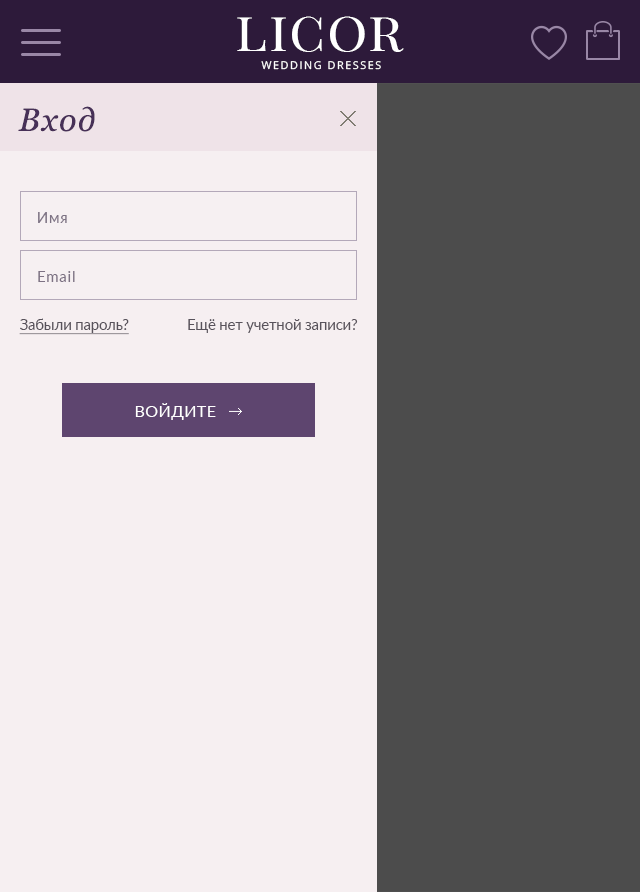
<style>
.page{position:relative;width:640px;height:892px;background:#f6eff1}
.page>*{position:absolute;margin:0}
.t1{font:55.3px "PlayfairDisplaySC-Regular";letter-spacing:0.03em;color:#ffffff}
.t2{font:10.6px "OpenSans";letter-spacing:0.15em;color:#ffffff}
.t3{font:32px "Georgia-Italic";letter-spacing:0.05em;color:#473057}
.t4{font:15px "Lato-Regular";letter-spacing:0.05em;color:#7d7284}
.t5{font:15px "Lato-Regular";letter-spacing:-0.015em;color:#58525b}
.t6{font:15px "Lato-Regular";letter-spacing:-0.015em;color:#58525b;text-decoration:underline}
.t7{font:16.2px "Lato-Regular";letter-spacing:0.025em;color:#ffffff;text-transform:uppercase}
</style>
<div class="page">
<p class="t1" style="left:237px;top:16px;width:167px;height:36px">licor</p>
<p class="t2" style="left:261px;top:61px;width:120px;height:9px">WEDDING DRESSES</p>
<p class="t3" style="left:18px;top:106px;width:77px;height:26px">Вход</p>
<p class="t4" style="left:38px;top:212px;width:29px;height:11px">Имя</p>
<p class="t4" style="left:38px;top:271px;width:37px;height:11px">Email</p>
<p class="t5" style="left:19px;top:318px;width:339px;height:17px"><span class="t6">Забыли пароль?</span>                Ещё нет учетной записи?</p>
<p class="t7" style="left:135px;top:403px;width:81px;height:17px">Войдите</p>
</div>
